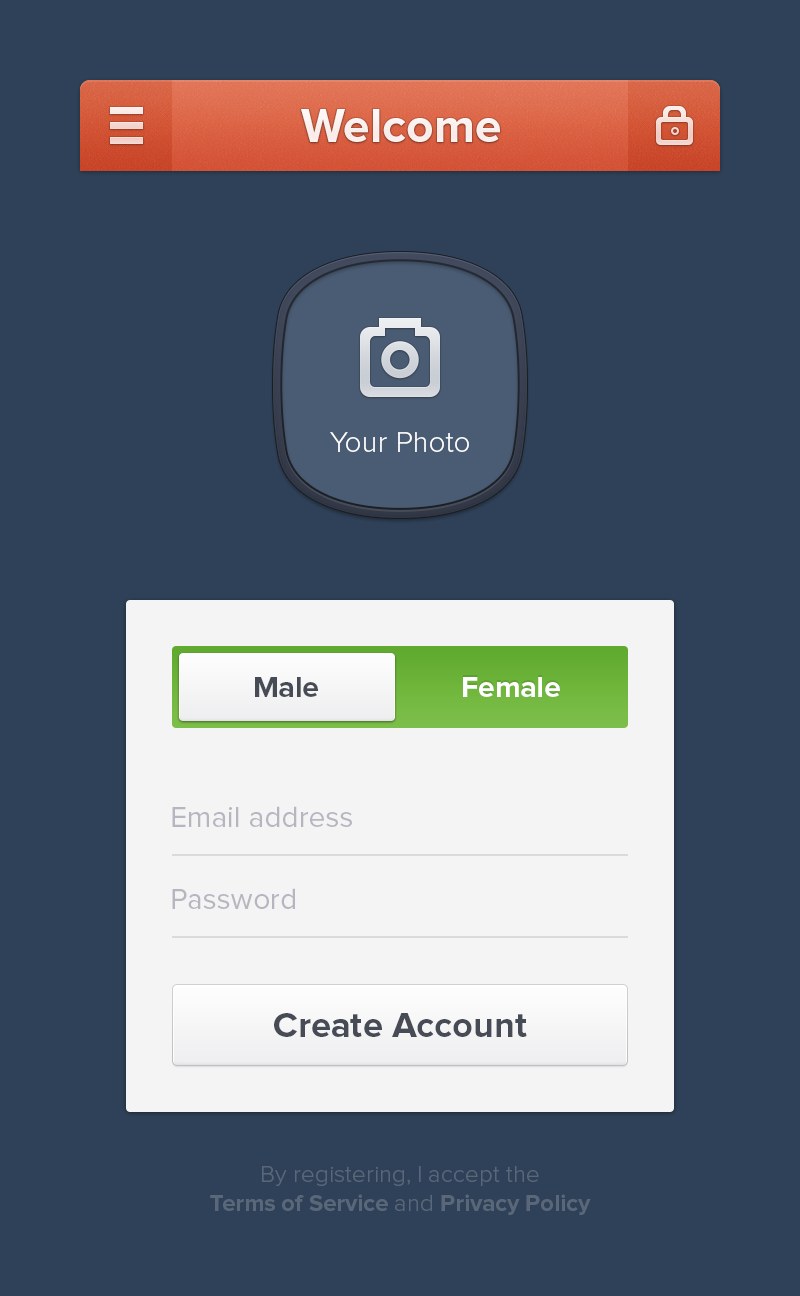
<style>
.page{position:relative;width:800px;height:1296px;background:#2f4158}
.page>*{position:absolute;margin:0}
.t1{font:48px "ProximaNova-Bold";color:#ffffff}
.t2{font:30px "ProximaNova-Light";color:#ffffff}
.t3{font:30px "ProximaNova-Bold";color:#464b55}
.t4{font:30px "ProximaNova-Bold";color:#ffffff}
.t5{font:30px "ProximaNova-Regular";color:#b5b6c0}
.t6{font:36px "ProximaNova-Bold";color:#464b55}
.t7{font:24px "ProximaNova-Light";color:#5a6779}
.t8{font:24px "ProximaNova-Bold";color:#5a6779}
</style>
<div class="page">
<p class="t1" style="left:301px;top:109px;width:199px;height:33px">Welcome</p>
<p class="t2" style="left:330px;top:432px;width:139px;height:20px">Your Photo</p>
<p class="t3" style="left:255px;top:677px;width:63px;height:20px">Male</p>
<p class="t4" style="left:463px;top:677px;width:97px;height:20px">Female</p>
<p class="t5" style="left:172px;top:806px;width:180px;height:21px">Email address</p>
<p class="t5" style="left:172px;top:888px;width:123px;height:21px">Password</p>
<p class="t6" style="left:274px;top:1013px;width:253px;height:24px">Create Account</p>
<p class="t7" style="left:210px;top:1166px;width:381px;height:49px;text-align:center">By registering, I accept the<br><span class="t8">Terms of Service </span>and <span class="t8">Privacy Policy</span></p>
</div>
